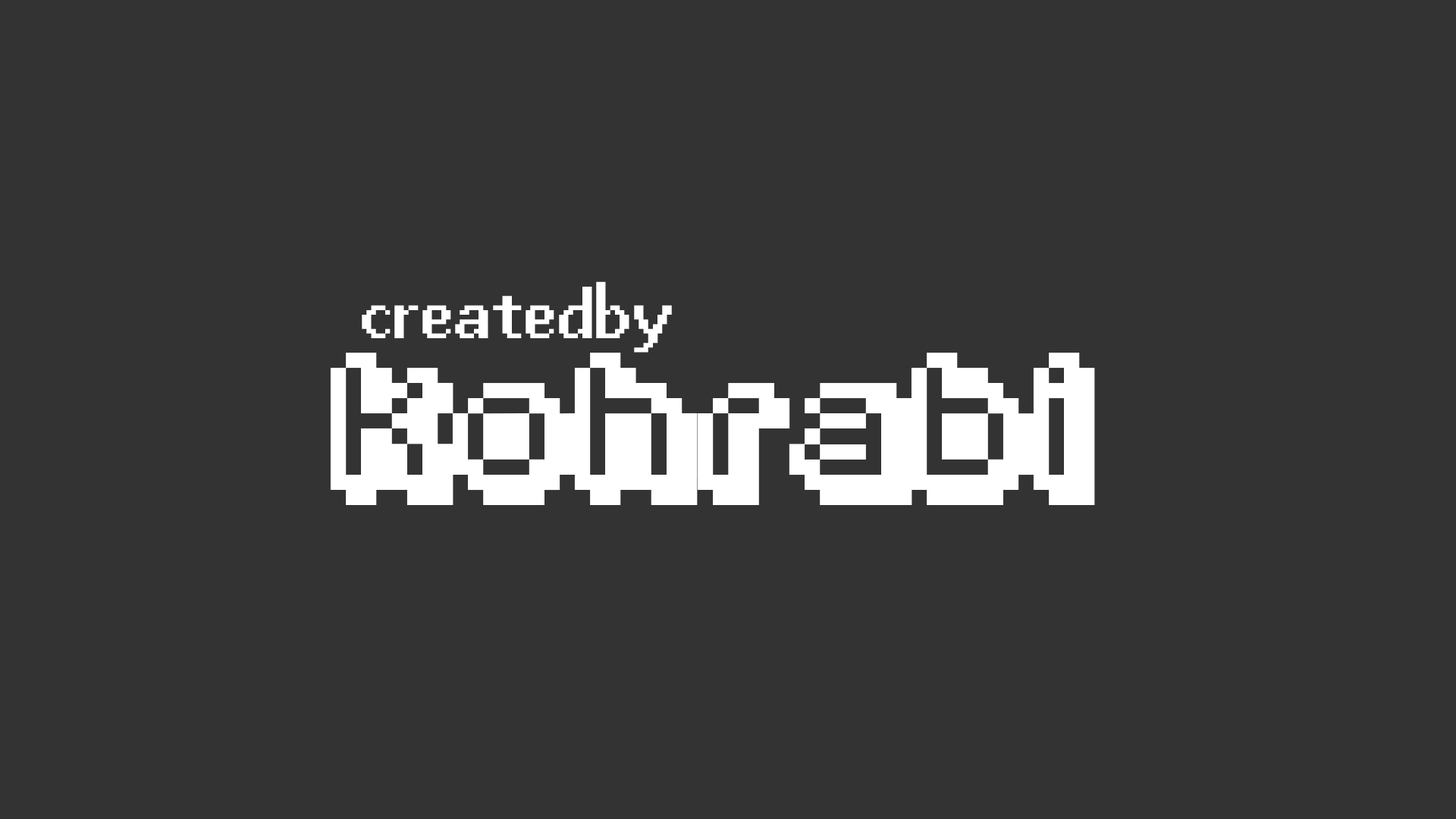
<style>
.page{position:relative;width:1456px;height:819px;background:#333333}
.page>*{position:absolute;margin:0}
.t1{font:75px "AbaddonBold";color:#ffffff}
.t2{font:122px "Fipps-Regular";color:#ffffff}
</style>
<div class="page">
<p class="t1" style="left:362px;top:281px;width:310px;height:72px">createdby</p>
<p class="t2" style="left:330px;top:353px;width:765px;height:152px">kohrabi</p>
</div>
